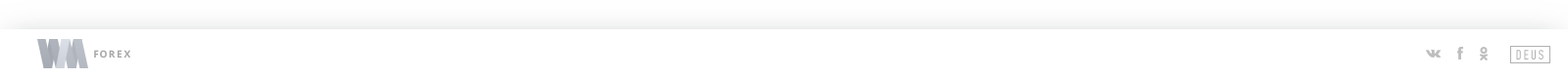
<style>
.page{position:relative;width:1568px;height:78px;background:#ffffff}
.page>*{position:absolute;margin:0}
.t1{font:9.8px "OpenSans-Bold";letter-spacing:0.12em;color:#a8a8a8;text-transform:uppercase}
.t2{font:13.7px "PFDinTextCompPro-Regular";letter-spacing:0.15em;color:#b1b1b1;text-transform:uppercase}
</style>
<div class="page">
<p class="t1" style="left:94px;top:50px;width:36px;height:9px">Forex</p>
<p class="t2" style="left:1516px;top:50px;width:28px;height:10px">DEUS</p>
</div>
